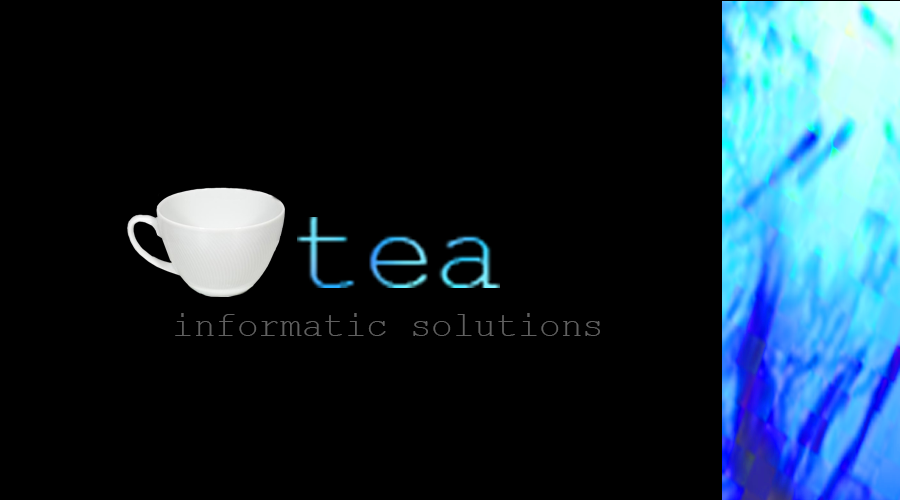
<style>
.page{position:relative;width:900px;height:500px;background:#000000}
.page>*{position:absolute;margin:0}
.t1{font:36px "CourierNewPSMT";color:#606060}
</style>
<div class="page">
<p class="t1" style="left:175px;top:313px;width:425px;height:23px">informatic solutions</p>
</div>
